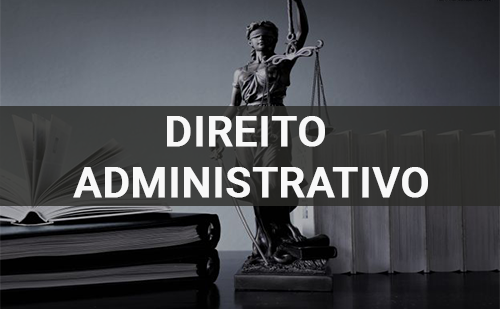
<style>
.page{position:relative;width:500px;height:309px}
.page>*{position:absolute;margin:0}
.t1{font:42px "Roboto-Medium";color:#f8f8f8;font-weight:bold}
</style>
<div class="page">
<p class="t1" style="left:73px;top:116px;width:355px;height:82px;text-align:center">DIREITO <br>ADMINISTRATIVO</p>
</div>
